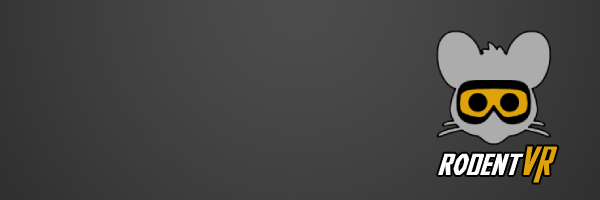
<style>
.page{position:relative;width:600px;height:200px}
.page>*{position:absolute;margin:0}
.t1{font:31px "HeroesAssembleExpandedItalic";color:#ffffff}
.t2{font:31px "HeroesAssembleExpandedItalic";color:#dea30a}
</style>
<div class="page">
<p class="t1" style="left:437px;top:146px;width:121px;height:37px">rodent<span class="t2">VR</span></p>
</div>
